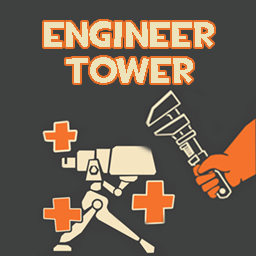
<style>
.page{position:relative;width:256px;height:256px;background:#3f4040}
.page>*{position:absolute;margin:0}
.t1{font:36px/36px "TF2Build";color:#ede3bb}
</style>
<div class="page">
<p class="t1" style="left:44px;top:21px;width:170px;height:62px;text-align:center">Engineer<br>Tower</p>
</div>
